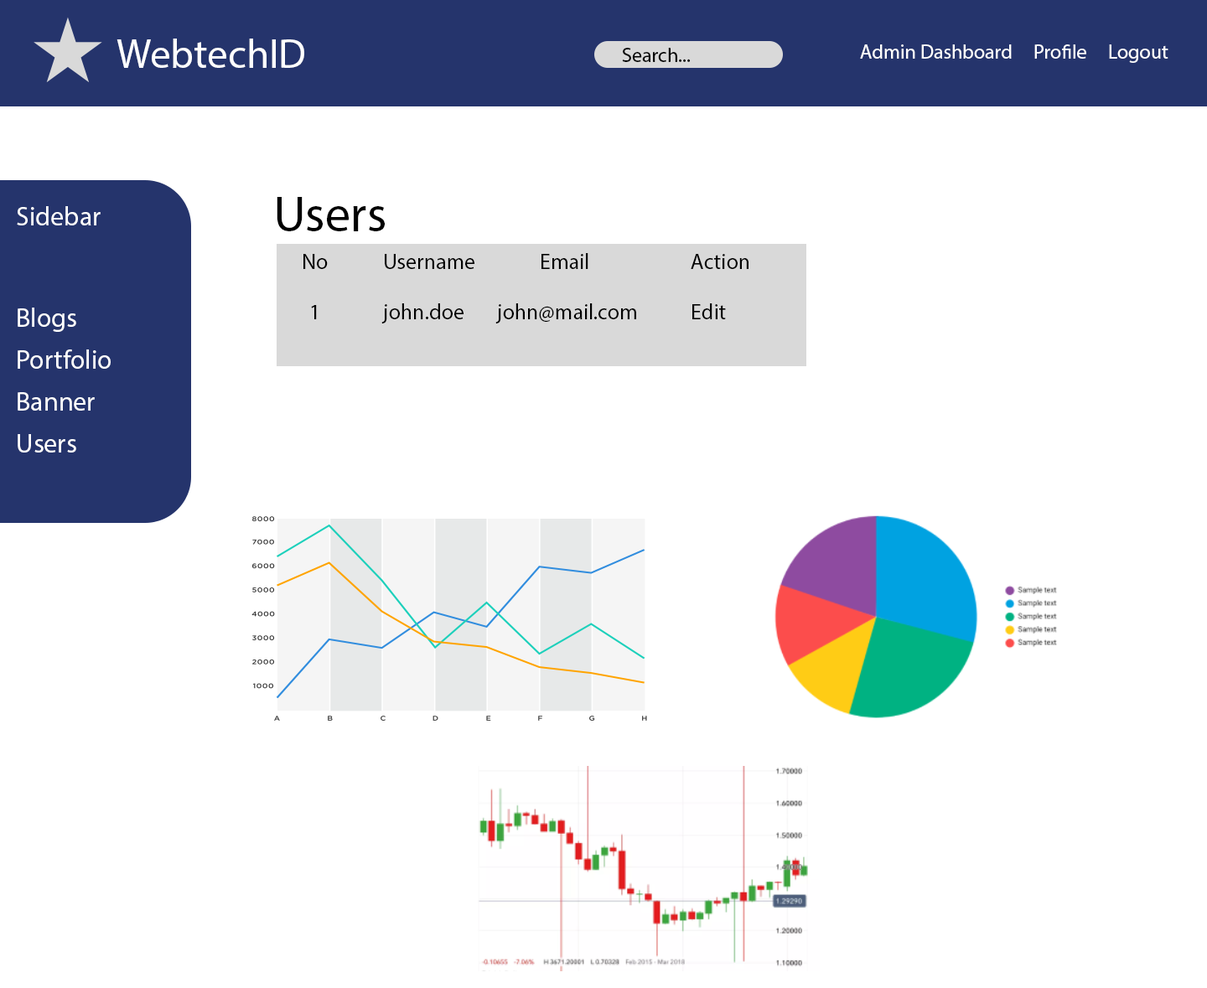
<style>
.page{position:relative;width:1207px;height:988px;background:#ffffff}
.page>*{position:absolute;margin:0}
.t1{font:41.1px "MyriadPro-Regular";color:#ffffff}
.t2{font:20.1px "MyriadPro-Regular";color:#000000}
.t3{font:20.1px "MyriadPro-Regular";color:#ffffff}
.t4{font:50.3px "MyriadPro-Regular";color:#000000}
.t5{font:26.8px "MyriadPro-Regular";color:#ffffff}
.t6{font:21.8px "MyriadPro-Regular";color:#000000}
</style>
<div class="page">
<p class="t1" style="left:116px;top:39px;width:188px;height:29px">WebtechID</p>
<p class="t2" style="left:622px;top:48px;width:69px;height:14px">Search...</p>
<p class="t3" style="left:860px;top:44px;width:308px;height:19px">Admin Dashboard     Profile     Logout</p>
<p class="t4" style="left:277px;top:197px;width:108px;height:34px">Users</p>
<p class="t5" style="left:17px;top:206px;width:84px;height:19px">Sidebar</p>
<p class="t6" style="left:303px;top:254px;width:25px;height:15px">No</p>
<p class="t6" style="left:385px;top:254px;width:89px;height:15px">Username</p>
<p class="t6" style="left:541px;top:253px;width:47px;height:16px">Email</p>
<p class="t6" style="left:691px;top:254px;width:57px;height:15px">Action</p>
<p class="t6" style="left:311px;top:305px;width:6px;height:14px">1</p>
<p class="t6" style="left:381px;top:303px;width:82px;height:20px">john.doe</p>
<p class="t6" style="left:495px;top:303px;width:141px;height:20px">john@mail.com</p>
<p class="t6" style="left:692px;top:303px;width:34px;height:16px">Edit</p>
<p class="t5" style="left:18px;top:308px;width:58px;height:24px">Blogs</p>
<p class="t5" style="left:18px;top:349px;width:93px;height:20px">Portfolio</p>
<p class="t5" style="left:18px;top:392px;width:77px;height:19px">Banner</p>
<p class="t5" style="left:18px;top:434px;width:58px;height:19px">Users</p>
</div>
